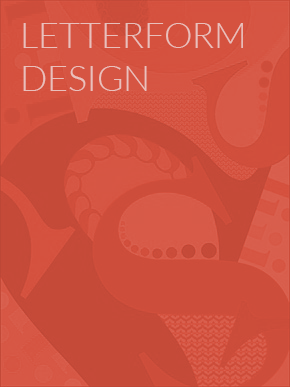
<style>
.page{position:relative;width:290px;height:387px}
.page>*{position:absolute;margin:0}
.t1{font:36px "Lato-Light";color:#e9bfbb}
</style>
<div class="page">
<p class="t1" style="left:23px;top:23px;width:220px;height:68px">LETTERFORM<br>DESIGN</p>
</div>
